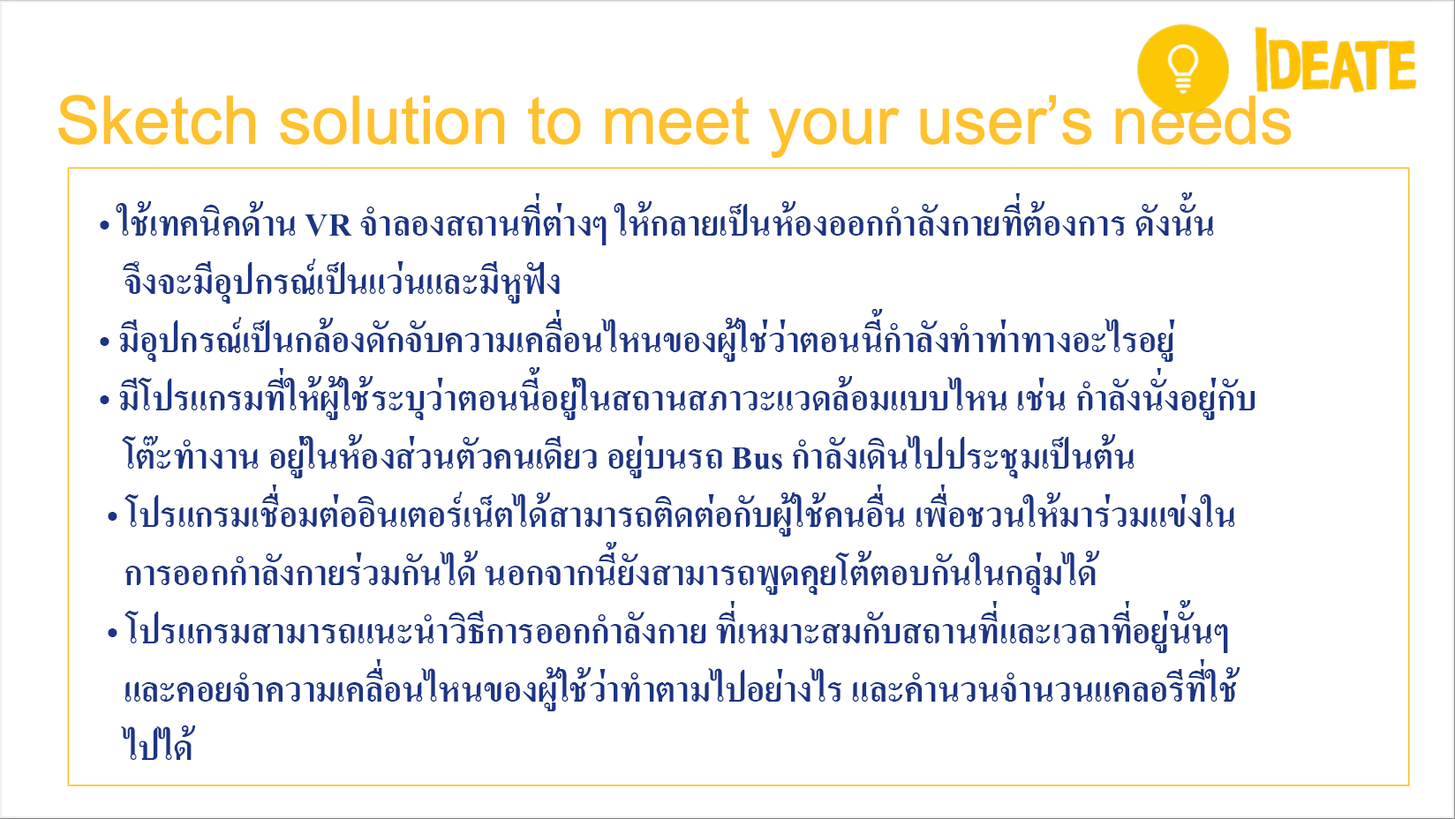
<style>
.page{position:relative;width:1455px;height:819px;background:#ffffff}
.page>*{position:absolute;margin:0}
.t1{font:48.6px "AngsanaUPC-Bold";color:#1b3485}
</style>
<div class="page">
<p class="t1" style="left:100px;top:192px;width:1156px;height:568px">• ใช้เทคนิคด้าน VR จำลองสถานที่ต่างๆ ให้กลายเป็นห้องออกกำลังกายที่ต้องการ ดังนั้น<br>   จึงจะมีอุปกรณ์เป็นแว่นและมีหูฟัง<br>• มีอุปกรณ์เป็นกล้องดักจับความเคลื่อนไหนของผู้ใช่ว่าตอนนี้กำลังทำท่าทางอะไรอยู่<br>• มีโปรแกรมที่ให้ผู้ใช้ระบุว่าตอนนี้อยู่ในสถานสภาวะแวดล้อมแบบไหน เช่น กำลังนั่งอยู่กับ<br>   โต๊ะทำงาน อยู่ในห้องส่วนตัวคนเดียว อยู่บนรถ Bus กำลังเดินไปประชุมเป็นต้น<br> • โปรแกรมเชื่อมต่ออินเตอร์เน็ตได้สามารถติดต่อกับผู้ใช้คนอื่น เพื่อชวนให้มาร่วมแข่งใน<br>   การออกกำลังกายร่วมกันได้ นอกจากนี้ยังสามารถพูดคุยโต้ตอบกันในกลุ่มได้<br> • โปรแกรมสามารถแนะนำวิธีการออกกำลังกาย ที่เหมาะสมกับสถานที่และเวลาที่อยู่นั้นๆ <br>   และคอยจำความเคลื่อนไหนของผู้ใช้ว่าทำตามไปอย่างไร และคำนวนจำนวนแคลอรีที่ใช้<br>   ไปได้</p>
</div>
